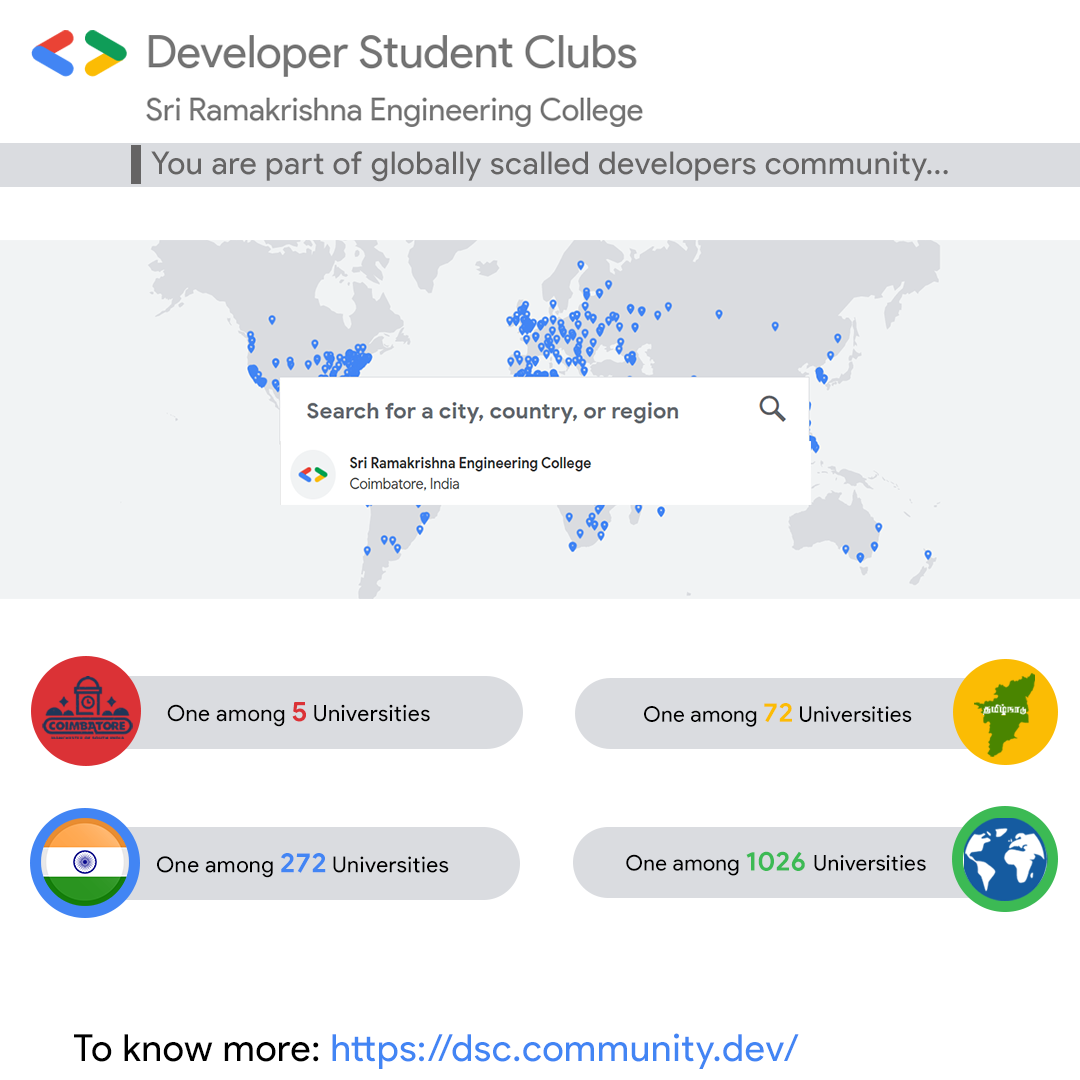
<style>
.page{position:relative;width:1080px;height:1080px;background:#ffffff}
.page>*{position:absolute;margin:0}
.t1{font:31.6px "ProductSans-Regular";letter-spacing:0.025em;color:#656464}
.t2{font:22.2px "ProductSans-Regular";letter-spacing:0.025em;color:#000000}
.t3{font:27.8px "ProductSans-Bold";letter-spacing:0.025em;color:#db3236}
.t4{font:21.4px "ProductSans-Regular";letter-spacing:0.025em;color:#000000}
.t5{font:26.8px "ProductSans-Bold";letter-spacing:0.025em;color:#fbbc04}
.t6{font:22.1px "ProductSans-Regular";letter-spacing:0.025em;color:#000000}
.t7{font:27.6px "ProductSans-Bold";letter-spacing:0.025em;color:#4285f4}
.t8{font:26.8px "ProductSans-Bold";letter-spacing:0.025em;color:#3cba54}
.t9{font:37.5px "ProductSans-Regular";letter-spacing:0.025em;color:#4285f4}
.t10{font:37.5px "ProductSans-Regular";letter-spacing:0.025em;color:#000000}
</style>
<div class="page">
<p class="t1" style="left:151px;top:151px;width:797px;height:31px">You are part of globally scalled developers community...</p>
<p class="t2" style="left:167px;top:702px;width:263px;height:25px">One among <span class="t3">5 </span>Universities</p>
<p class="t4" style="left:644px;top:703px;width:268px;height:24px">One among <span class="t5">72 </span>Universities</p>
<p class="t6" style="left:157px;top:853px;width:292px;height:25px">One among <span class="t7">272 </span>Universities</p>
<p class="t4" style="left:626px;top:851px;width:300px;height:25px">One among <span class="t8">1026 </span>Universities</p>
<p class="t9" style="left:74px;top:1033px;width:725px;height:36px"><span class="t10">To know more: </span>https://dsc.community.dev/</p>
</div>
